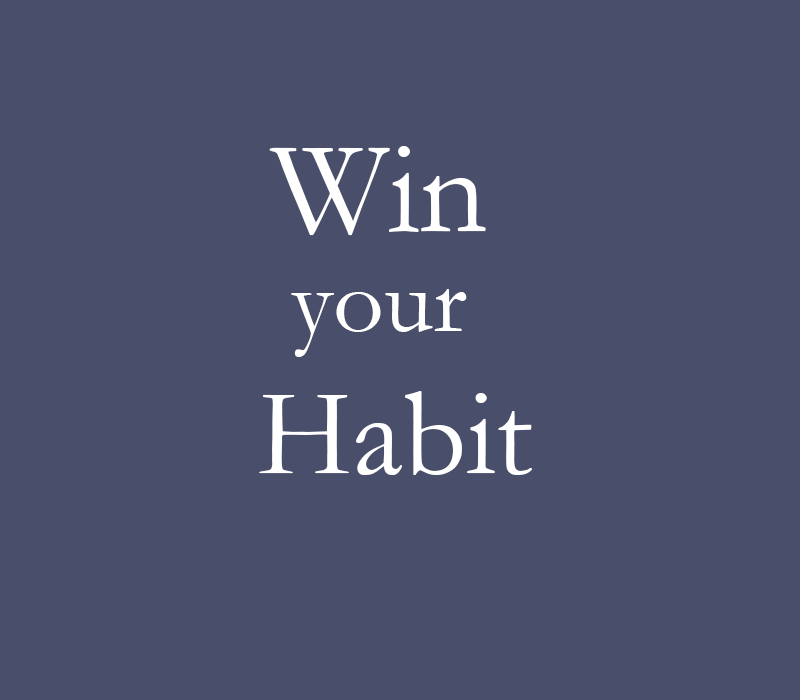
<style>
.page{position:relative;width:800px;height:700px;background:#494e6b}
.page>*{position:absolute;margin:0}
.t1{font:125px/141.7px "Garamond";color:#ffffff}
.t2{font:133.3px/58.3px "Garamond";color:#ffffff}
.t3{font:100px/100px "Garamond";color:#ffffff}
</style>
<div class="page">
<p class="t1" style="left:259px;top:146px;width:273px;height:329px;text-align:center"><span class="t2">Win <br></span><span class="t3">your <br></span>Habit</p>
</div>
